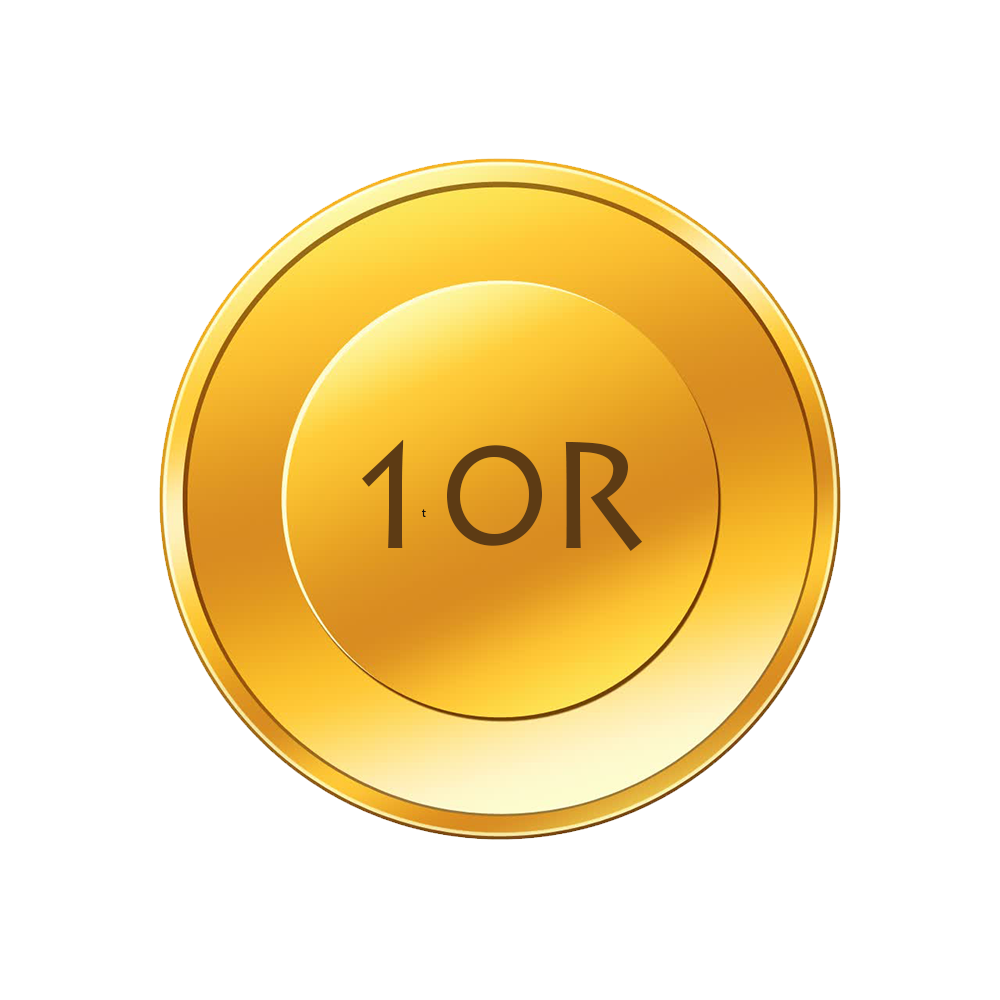
<style>
.page{position:relative;width:1000px;height:1000px;background:#ffffff}
.page>*{position:absolute;margin:0}
.t1{font:150px "LithosPro-Regular";letter-spacing:-0.025em;color:#5d3b14}
.t2{font:150px "LithosPro-Regular";color:#5d3b14}
.t3{font:12px "MyriadHebrew-Regular";color:#111111}
</style>
<div class="page">
<p class="t1" style="left:362px;top:439px;width:281px;height:112px">10<span class="t2">R</span></p>
<p class="t3" style="left:422px;top:509px;width:4px;height:8px">t</p>
</div>
